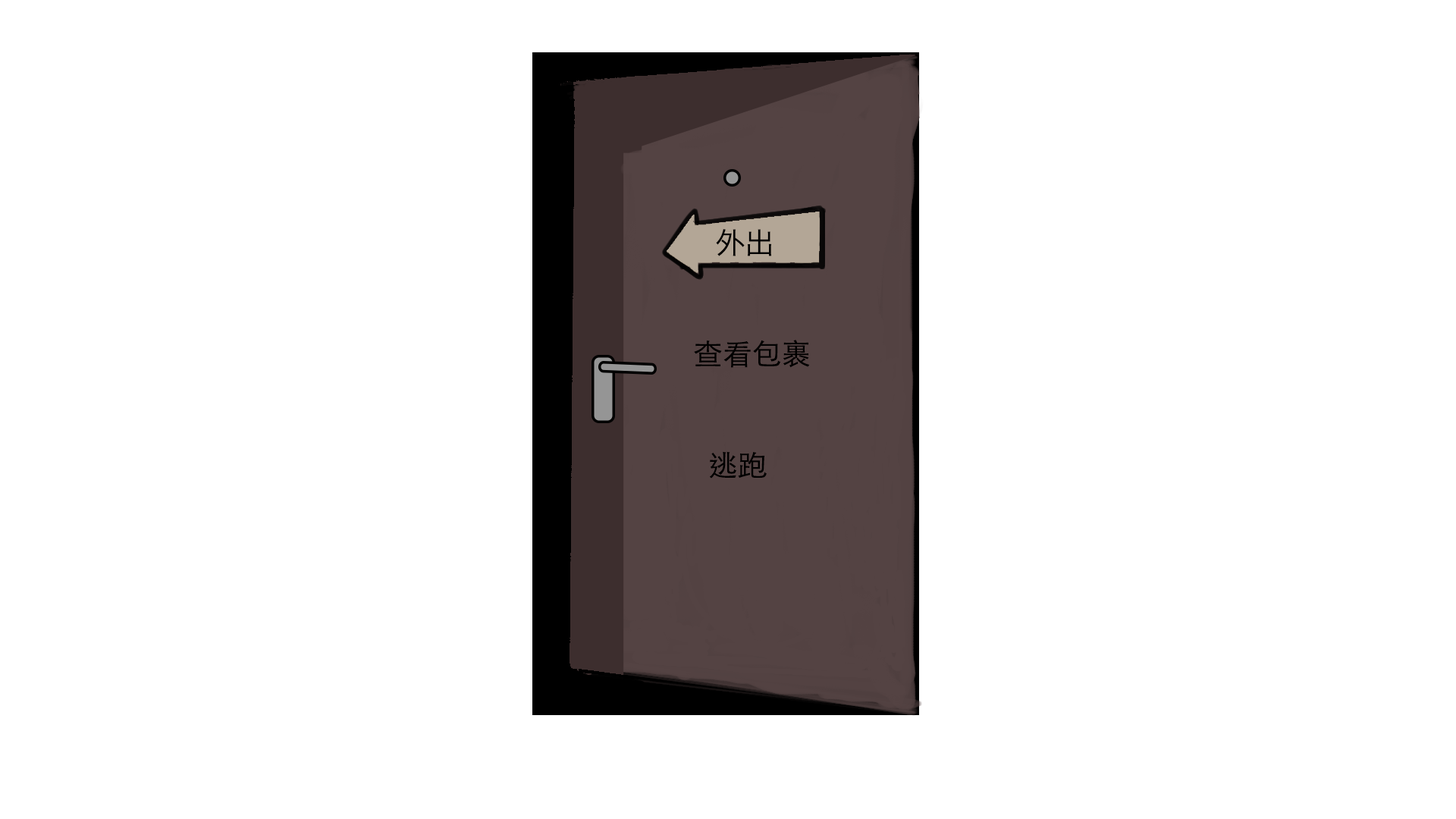
<style>
.page{position:relative;width:1456px;height:819px;background:#ffffff}
.page>*{position:absolute;margin:0}
.t1{font:29.5px "HiraginoSansCNS-W3";color:#000000}
.t2{font:29.5px "STHeitiTC-Light";color:#000000}
</style>
<div class="page">
<p class="t1" style="left:716px;top:229px;width:55px;height:27px">外出</p>
<p class="t2" style="left:694px;top:340px;width:116px;height:28px">查看包裹</p>
<p class="t2" style="left:710px;top:451px;width:57px;height:28px">逃跑</p>
</div>
